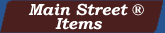
<style>
.page{position:relative;width:165px;height:33px;background:#4c1f1f}
.page>*{position:absolute;margin:0}
.t1{font:16px "BookmanOldStyle-BoldItalic";color:#ffffff}
</style>
<div class="page">
<p class="t1" style="left:28px;top:3px;width:116px;height:13px">Main Street ®</p>
<p class="t1" style="left:55px;top:18px;width:47px;height:12px">Items</p>
</div>
